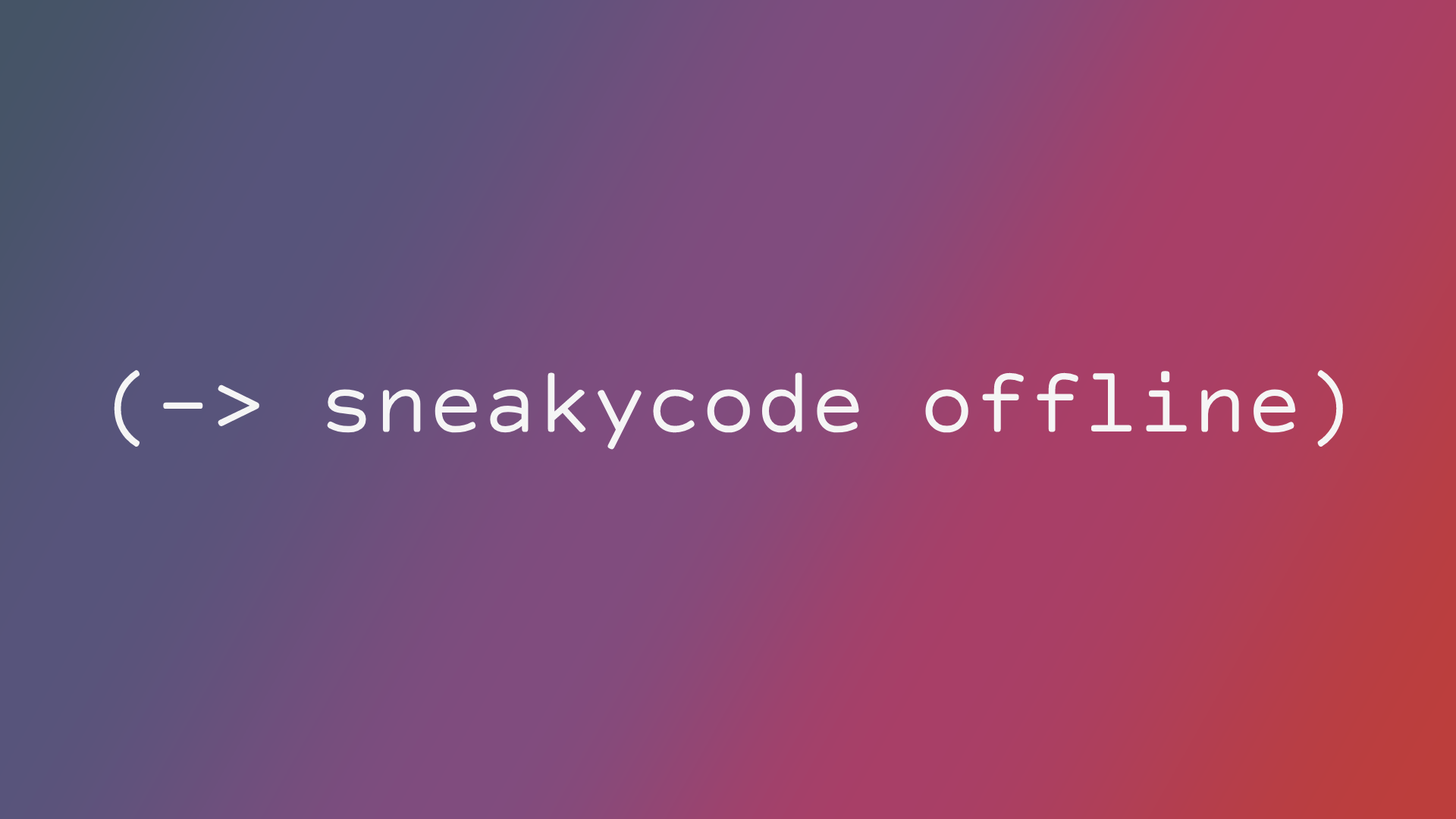
<style>
.page{position:relative;width:1456px;height:819px}
.page>*{position:absolute;margin:0}
.t1{font:91px "CourierPrimeCode-Regular";color:#f5f5f5}
</style>
<div class="page">
<p class="t1" style="left:114px;top:370px;width:1229px;height:80px">(-&gt; sneakycode offline)</p>
</div>
